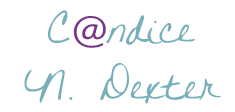
<style>
.page{position:relative;width:235px;height:112px;background:#ffffff}
.page>*{position:absolute;margin:0}
.t1{font:48px "WrittenonHisHands";color:#76afba;scale:1.08 1}
.t2{font:40px "Lato-Regular";color:#7b3688;scale:1.08 1}
.t3{font:45px "WrittenonHisHands";letter-spacing:-0.05em;color:#76afba;scale:1.08 1}
.t4{font:57.6px "WrittenonHisHands";letter-spacing:0.025em;color:#76afba;scale:0.93 1}
.t5{font:48px/6px "WrittenonHisHands";letter-spacing:-0.01em;color:#76afba;scale:1.08 1}
.t6{font:48px "WrittenonHisHands";letter-spacing:-0.075em;color:#76afba;scale:1.08 1}
</style>
<div class="page">
<p class="t1" style="left:24px;top:10px;width:197px;height:94px;text-align:center">C<span class="t2">@</span><span class="t3">n</span><span class="t4">d</span><span class="t5">ic</span>e<span class="t6"> <br></span>N. Dexter</p>
</div>
